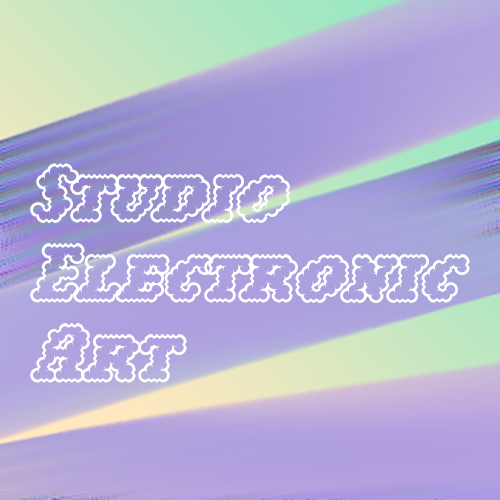
<style>
.page{position:relative;width:500px;height:500px}
.page>*{position:absolute;margin:0}
.t1{font:66.7px "NarlyOT-Outline";color:#ffffff}
</style>
<div class="page">
<p class="t1" style="left:30px;top:163px;width:440px;height:220px">Studio <br>Electronic <br>Art</p>
</div>
